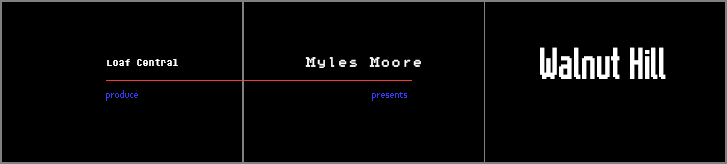
<style>
.page{position:relative;width:727px;height:164px;background:#000000}
.page>*{position:absolute;margin:0}
.t1{font:33.3px "MotorolaScreenType";color:#ffffff}
.t2{font:12px "DeterminationMonoWeb";color:#ffffff}
.t3{font:10.7px "Earthbound-Beginnings";color:#ffffff}
</style>
<div class="page">
<p class="t1" style="left:540px;top:47px;width:126px;height:32px">Walnut Hill</p>
<p class="t2" style="left:107px;top:59px;width:71px;height:7px">Loaf Central</p>
<p class="t3" style="left:305px;top:57px;width:116px;height:11px">Myles Moore</p>
</div>
